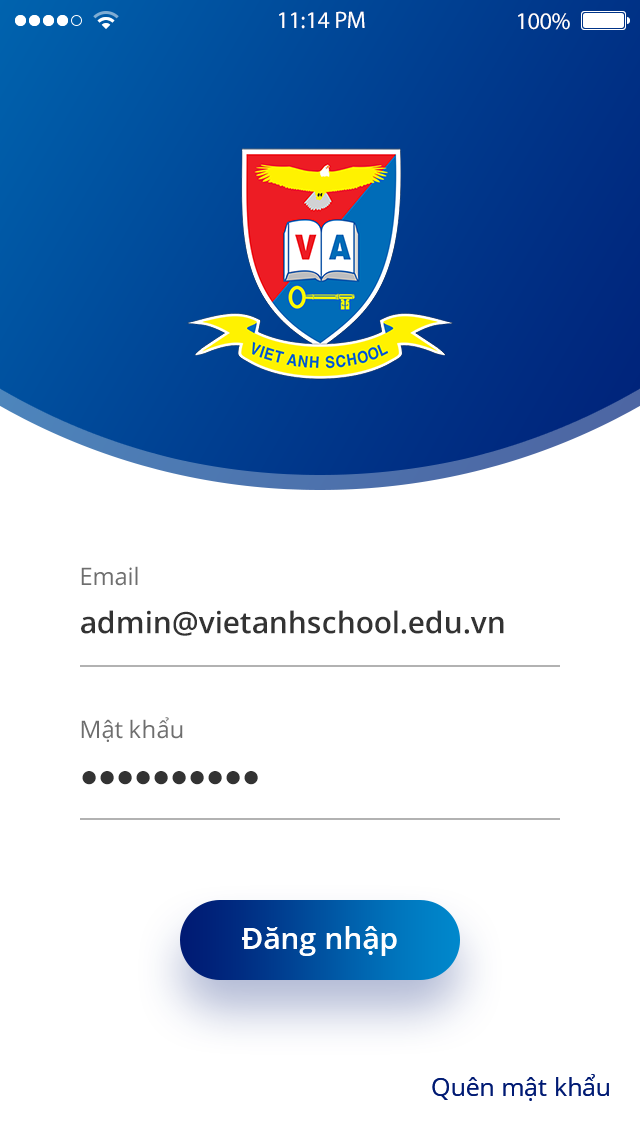
<style>
.page{position:relative;width:640px;height:1136px;background:#ffffff}
.page>*{position:absolute;margin:0}
.t1{font:24px "MyriadPro-Regular";color:#ffffff}
.t2{font:24px "OpenSans-Regular";color:#6e6e6e}
.t3{font:30px "OpenSans-SemiBold";color:#333333}
.t4{font:30px "TimesNewRomanPSMT";color:#333333}
.t5{font:30px "OpenSans-SemiBold";color:#fefefe}
.t6{font:25px "OpenSans-Regular";color:#001a73}
</style>
<div class="page">
<p class="t1" style="left:279px;top:11px;width:86px;height:18px">11:14 PM</p>
<p class="t1" style="left:518px;top:13px;width:52px;height:17px">100%</p>
<p class="t2" style="left:81px;top:566px;width:57px;height:20px">Email</p>
<p class="t3" style="left:81px;top:610px;width:423px;height:26px">admin@vietanhschool.edu.vn</p>
<p class="t2" style="left:81px;top:717px;width:102px;height:25px">Mật khẩu</p>
<p class="t4" style="left:82px;top:771px;width:176px;height:14px">●●●●●●●●●●</p>
<p class="t5" style="left:242px;top:926px;width:155px;height:30px">Đăng nhập</p>
<p class="t6" style="left:432px;top:1074px;width:177px;height:27px">Quên mật khẩu</p>
</div>
